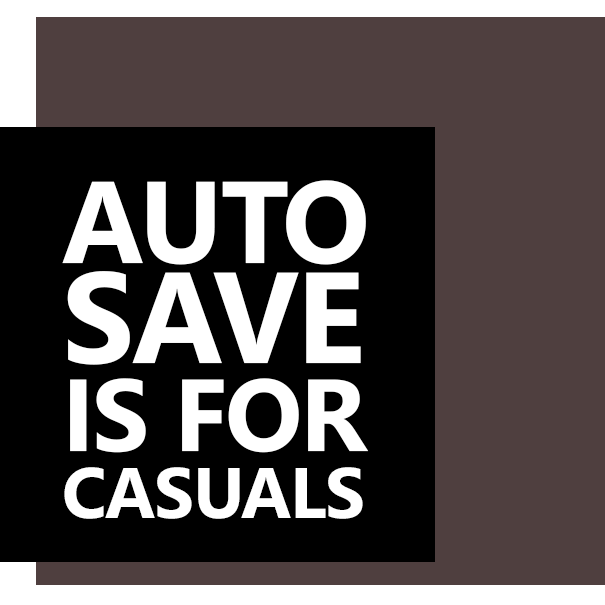
<style>
.page{position:relative;width:605px;height:605px;background:#4f3f3f}
.page>*{position:absolute;margin:0}
.t1{font:116.1px "SegoeUI-Bold";letter-spacing:-0.02em;color:#ffffff}
.t2{font:129px "SegoeUI-Bold";letter-spacing:-0.02em;color:#ffffff}
.t3{font:101.9px "SegoeUI-Bold";letter-spacing:-0.02em;color:#ffffff}
.t4{font:71.4px "SegoeUI-Bold";letter-spacing:-0.02em;color:#ffffff}
</style>
<div class="page">
<p class="t1" style="left:62px;top:180px;width:304px;height:85px">AUTO</p>
<p class="t2" style="left:67px;top:271px;width:294px;height:94px">SAVE</p>
<p class="t3" style="left:70px;top:378px;width:299px;height:75px">IS FOR</p>
<p class="t4" style="left:64px;top:467px;width:299px;height:52px">CASUALS</p>
</div>
